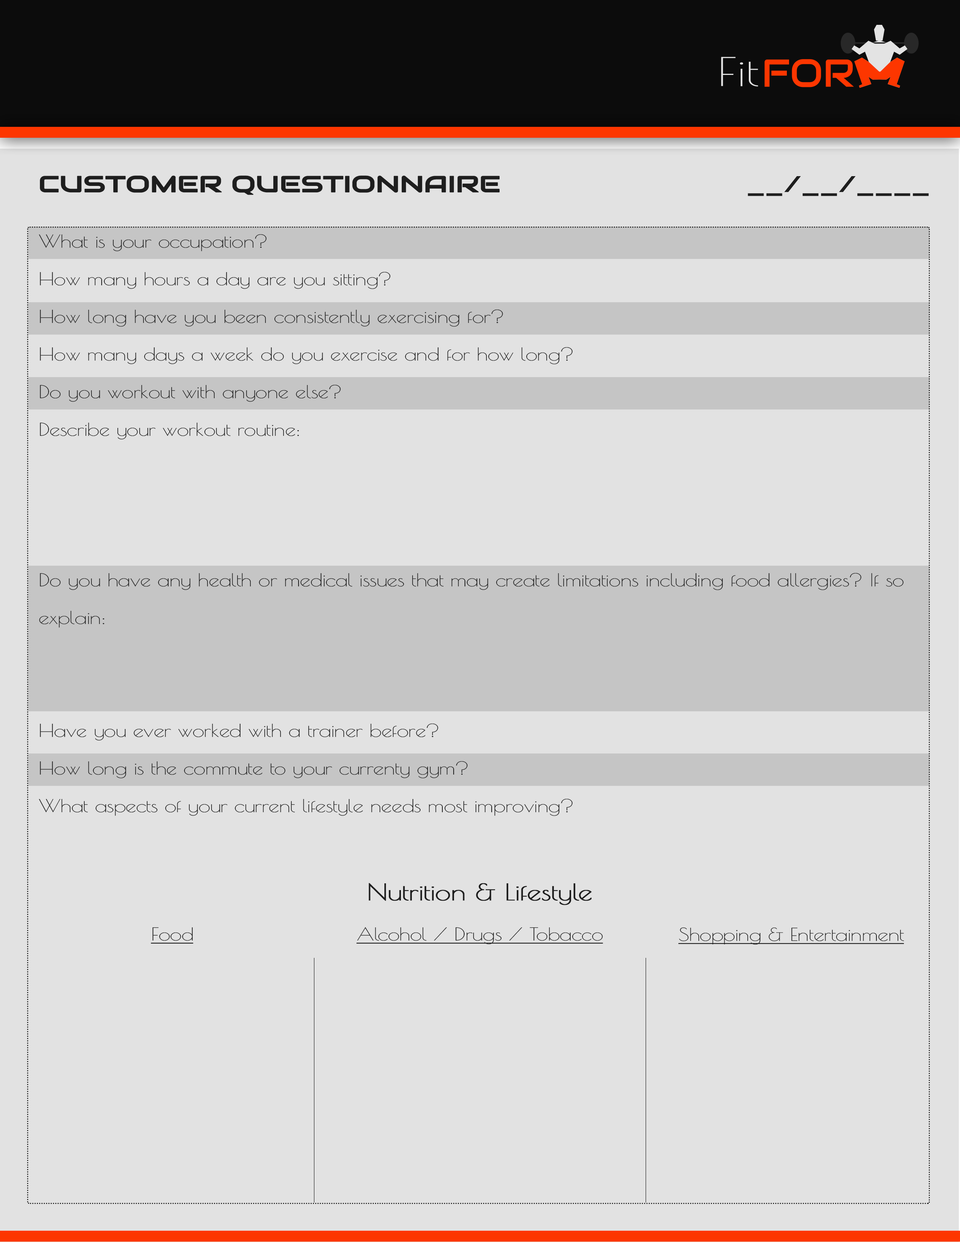
<style>
.page{position:relative;width:960px;height:1242px;background:#e2e2e2}
.page>*{position:absolute;margin:0}
.t1{font:22.6px "Audiowide-Regular";letter-spacing:-0.025em;color:#1e1e1e;text-transform:uppercase;font-weight:bold;scale:1.25 1}
.t2{font:22.6px "Audiowide-Regular";letter-spacing:-0.025em;color:#1e1e1e;text-transform:uppercase;scale:1.25 1}
.t3{font:17.6px/37.6px "PoiretOne-Regular";letter-spacing:-0.025em;color:#1e1e1e;scale:1.25 1}
.t4{font:22.6px "PoiretOne-Regular";letter-spacing:-0.025em;color:#1e1e1e;font-weight:bold;scale:1.25 1}
.t5{font:17.6px "PoiretOne-Regular";letter-spacing:-0.025em;color:#1e1e1e;text-decoration:underline;scale:1.25 1}
</style>
<div class="page">
<p class="t1" style="left:40px;top:175px;width:460px;height:20px">Customer Questionnaire</p>
<p class="t2" style="left:748px;top:176px;width:181px;height:20px">__/__/____</p>
<p class="t3" style="left:39px;top:234px;width:864px;height:582px">What is your occupation?                                             <br>How many hours a day are you sitting?                                  <br>How long have you been consistently exercising for?                        <br>How many days a week do you exercise and for how long?                  <br>Do you workout with anyone else?<br>Describe your workout routine:                                                                                                            <br>                                                                 <br>                                                                 <br>Do you have any health or medical issues that may create limitations including food allergies? If so explain:<br><br><br>Have you ever worked with a trainer before?<br>How long is the commute to your currenty gym?<br>What aspects of your current lifestyle needs most improving?</p>
<p class="t4" style="left:369px;top:883px;width:223px;height:22px">Nutrition &amp; Lifestyle</p>
<p class="t5" style="left:151px;top:927px;width:42px;height:17px">Food</p>
<p class="t5" style="left:356px;top:927px;width:247px;height:17px">Alcohol / Drugs / Tobacco</p>
<p class="t5" style="left:678px;top:928px;width:226px;height:17px">Shopping &amp; Entertainment</p>
</div>
